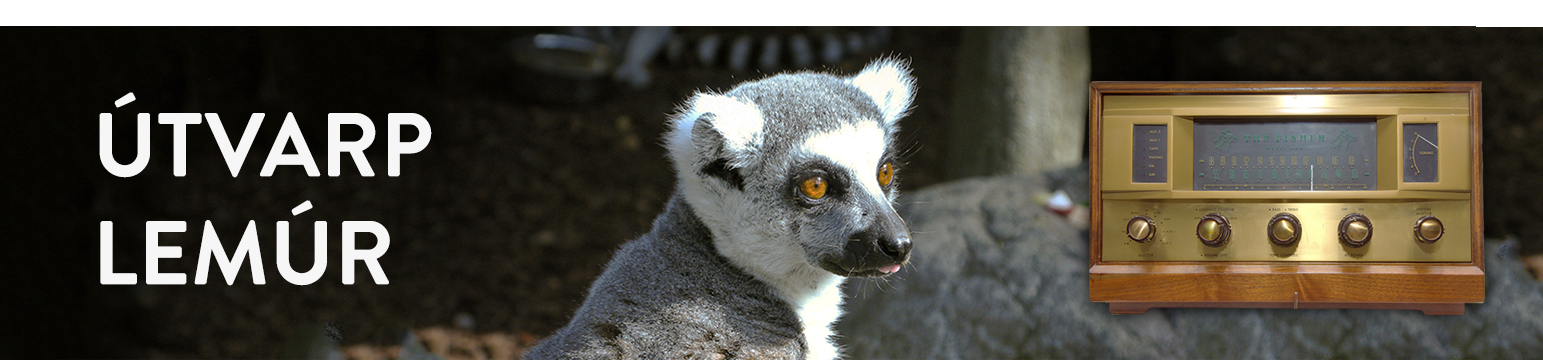
<style>
.page{position:relative;width:1543px;height:360px}
.page>*{position:absolute;margin:0}
.t1{font:90px "BrandonGrotesque-Bold";color:#f6f6f6}
</style>
<div class="page">
<p class="t1" style="left:99px;top:92px;width:333px;height:194px">ÚTVARP<br>LEMÚR</p>
</div>
